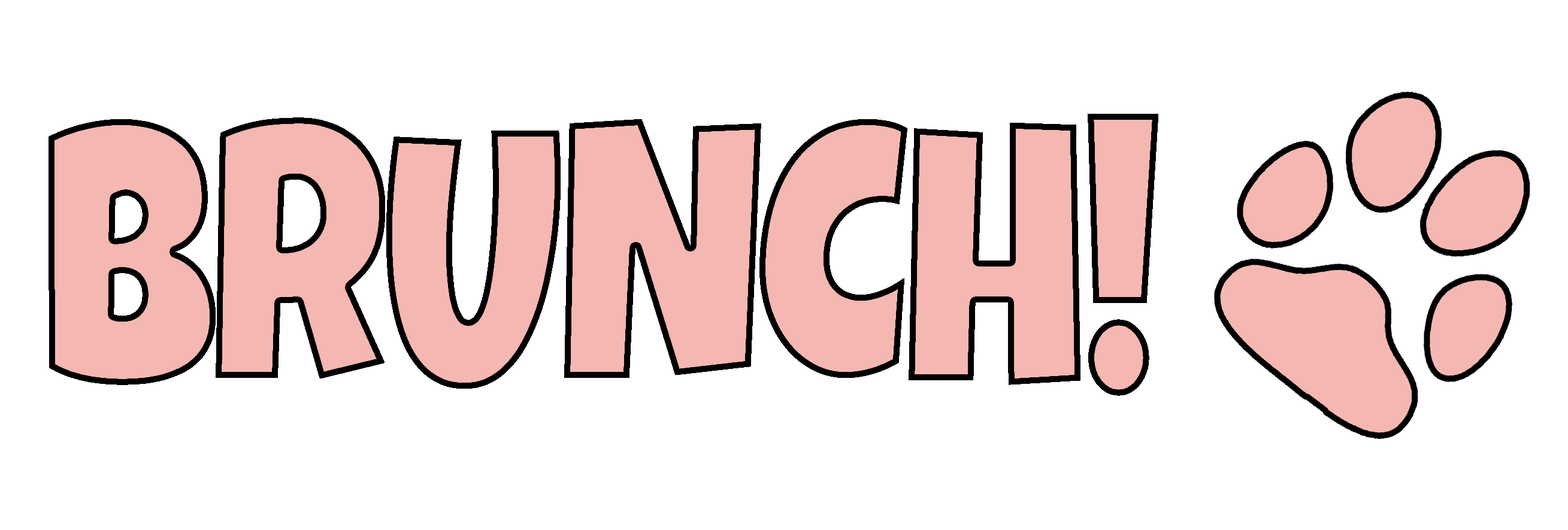
<style>
.page{position:relative;width:1568px;height:530px;background:#ffffff}
.page>*{position:absolute;margin:0}
.t1{font:366.7px "LuckiestGuy-Regular";letter-spacing:-0.02em;color:#f5b7b1;scale:0.8 1}
</style>
<div class="page">
<p class="t1" style="left:49px;top:114px;width:1109px;height:282px">BRUNCH!</p>
</div>
